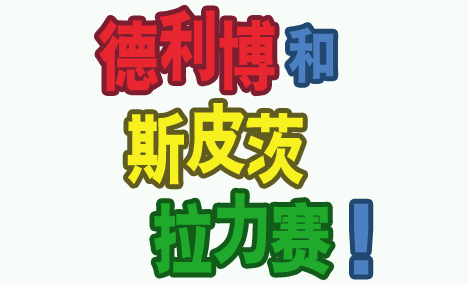
<style>
.page{position:relative;width:468px;height:284px;background:#f8fcf8}
.page>*{position:absolute;margin:0}
.t1{font:80px "HYb9gj";letter-spacing:-0.1em;color:#e82630;scale:0.8 1}
.t2{font:62.7px "HYb9gj";letter-spacing:-0.1em;color:#4d80c2;scale:0.8 1}
.t3{font:80px "HYb9gj";letter-spacing:-0.1em;color:#f8f120;scale:0.8 1}
.t4{font:80px "HYb9gj";letter-spacing:-0.1em;color:#20aa2c;scale:0.8 1}
.t5{font:100px "HYb9gj";letter-spacing:-0.1em;color:#4d80c2}
</style>
<div class="page">
<p class="t1" style="left:158px;top:9px;width:57px;height:73px">利</p>
<p class="t1" style="left:98px;top:19px;width:61px;height:72px">德</p>
<p class="t1" style="left:218px;top:19px;width:57px;height:73px">博</p>
<p class="t2" style="left:289px;top:27px;width:45px;height:56px">和</p>
<p class="t3" style="left:127px;top:112px;width:57px;height:73px">斯</p>
<p class="t3" style="left:186px;top:103px;width:59px;height:72px">皮</p>
<p class="t3" style="left:245px;top:113px;width:59px;height:72px">茨</p>
<p class="t4" style="left:214px;top:192px;width:53px;height:73px">力</p>
<p class="t4" style="left:154px;top:202px;width:58px;height:72px">拉</p>
<p class="t4" style="left:271px;top:202px;width:60px;height:74px">赛</p>
<p class="t5" style="left:354px;top:203px;width:15px;height:72px">!</p>
</div>
